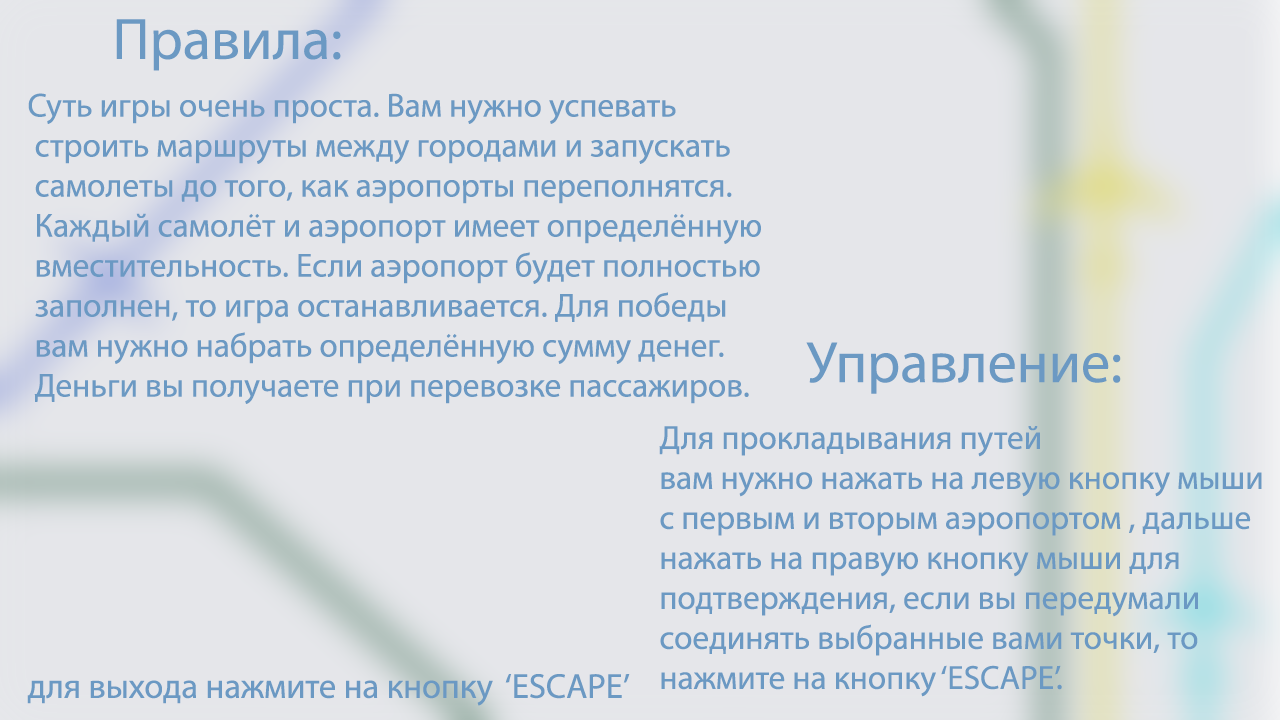
<style>
.page{position:relative;width:1280px;height:720px;background:#e5e6ea}
.page>*{position:absolute;margin:0}
.t1{font:58.3px "MyriadPro-Regular";color:#6b99c3}
.t2{font:33.3px "MyriadPro-Regular";color:#6b99c3}
.t3{font:34.6px "MyriadPro-Regular";color:#6b99c3}
</style>
<div class="page">
<p class="t1" style="left:116px;top:19px;width:225px;height:52px">Правила:</p>
<p class="t2" style="left:28px;top:93px;width:733px;height:311px">Суть игры очень проста. Вам нужно успевать<br> строить маршруты между городами и запускать<br> самолеты до того, как аэропорты переполнятся.<br> Каждый самолёт и аэропорт имеет определённую<br> вместительность. Если аэропорт будет полностью<br> заполнен, то игра останавливается. Для победы<br> вам нужно набрать определённую сумму денег.<br> Деньги вы получаете при перевозке пассажиров.</p>
<p class="t1" style="left:806px;top:342px;width:315px;height:52px">Управление:</p>
<p class="t2" style="left:659px;top:426px;width:603px;height:271px">Для прокладывания путей<br>вам нужно нажать на левую кнопку мыши<br>с первым и вторым аэропортом , дальше<br>нажать на правую кнопку мыши для<br>подтверждения, если вы передумали<br>соединять выбранные вами точки, то<br>нажмите на кнопку ‘ESCAPE’.</p>
<p class="t3" style="left:27px;top:674px;width:603px;height:32px">для выхода нажмите на кнопку  ‘ESCAPE’</p>
</div>
